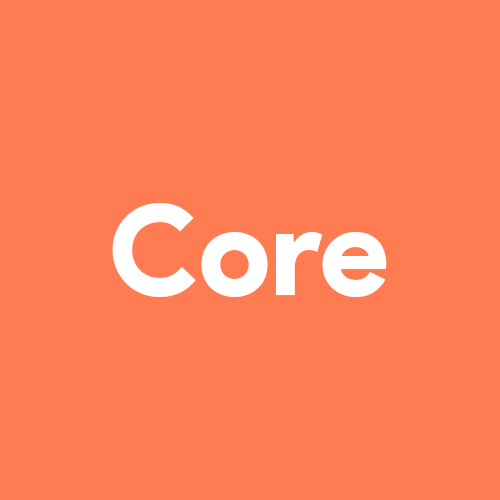
<style>
.page{position:relative;width:500px;height:500px;background:#ff7b51}
.page>*{position:absolute;margin:0}
.t1{font:125px "ProductSans-Black";color:#ffffff}
</style>
<div class="page">
<p class="t1" style="left:112px;top:203px;width:275px;height:94px">Core</p>
</div>
